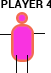
<style>
.page{position:relative;width:51px;height:73px;background:#ffffff}
.page>*{position:absolute;margin:0}
.t1{font:11px "Roboto-Bold";letter-spacing:0.025em;color:#000000}
</style>
<div class="page">
<p class="t1" style="left:1px;top:0px;width:52px;height:8px">PLAYER 4</p>
</div>
